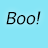
<style>
.page{position:relative;width:48px;height:48px;background:#85e5f6}
.page>*{position:absolute;margin:0}
.t1{font:16px "Geneva";color:#000000;font-style:italic}
</style>
<div class="page">
<p class="t1" style="left:6px;top:11px;width:35px;height:14px">Boo!</p>
</div>
